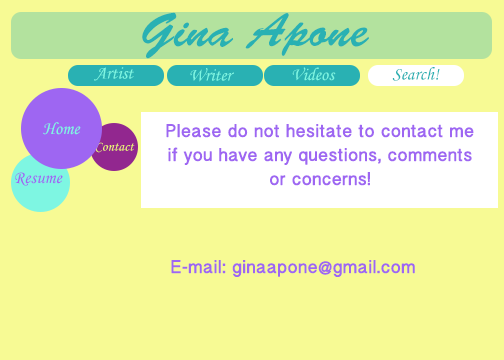
<style>
.page{position:relative;width:504px;height:360px;background:#f7fa94}
.page>*{position:absolute;margin:0}
.t1{font:48px "BrushScriptStd";color:#29b1b3}
.t2{font:18px "MonotypeCorsiva";color:#7ef6e2}
.t3{font:18px "MonotypeCorsiva";color:#29b1b3}
.t4{font:18px/24px "BanglaSangamMN";color:#9e66f2;font-weight:bold}
.t5{font:14px "MonotypeCorsiva";color:#eef275}
.t6{font:18px "MonotypeCorsiva";color:#9e66f2}
.t7{font:18px "BanglaSangamMN";color:#9e66f2;font-weight:bold}
</style>
<div class="page">
<p class="t1" style="left:142px;top:12px;width:227px;height:47px">Gina Apone</p>
<p class="t2" style="left:94px;top:67px;width:40px;height:14px">Artist</p>
<p class="t2" style="left:190px;top:68px;width:44px;height:14px">Writer</p>
<p class="t2" style="left:292px;top:67px;width:44px;height:14px">Videos</p>
<p class="t3" style="left:392px;top:67px;width:48px;height:14px">Search!</p>
<p class="t2" style="left:43px;top:122px;width:38px;height:13px">Home</p>
<p class="t4" style="left:166px;top:124px;width:308px;height:62px;text-align:center">Please do not hesitate to contact me if you have any questions, comments or concerns!</p>
<p class="t5" style="left:95px;top:142px;width:40px;height:11px">Contact</p>
<p class="t6" style="left:15px;top:172px;width:48px;height:14px">Resume</p>
<p class="t7" style="left:171px;top:260px;width:244px;height:17px">E-mail: ginaapone@gmail.com</p>
</div>
